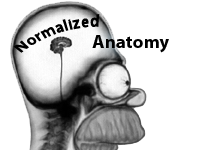
<style>
.page{position:relative;width:200px;height:150px;background:#ffffff}
.page>*{position:absolute;margin:0}
.t1{font:14.7px/18.7px "MyriadPro-Bold";letter-spacing:0.01em;color:#000000}
.t2{font:18.7px "MyriadPro-Bold";letter-spacing:0.01em;color:#010101}
</style>
<div class="page">
<p class="t1" style="left:13px;top:14px;width:87px;height:39px;text-align:center">Normalized</p>
<p class="t2" style="left:92px;top:35px;width:77px;height:18px">Anatomy</p>
</div>
